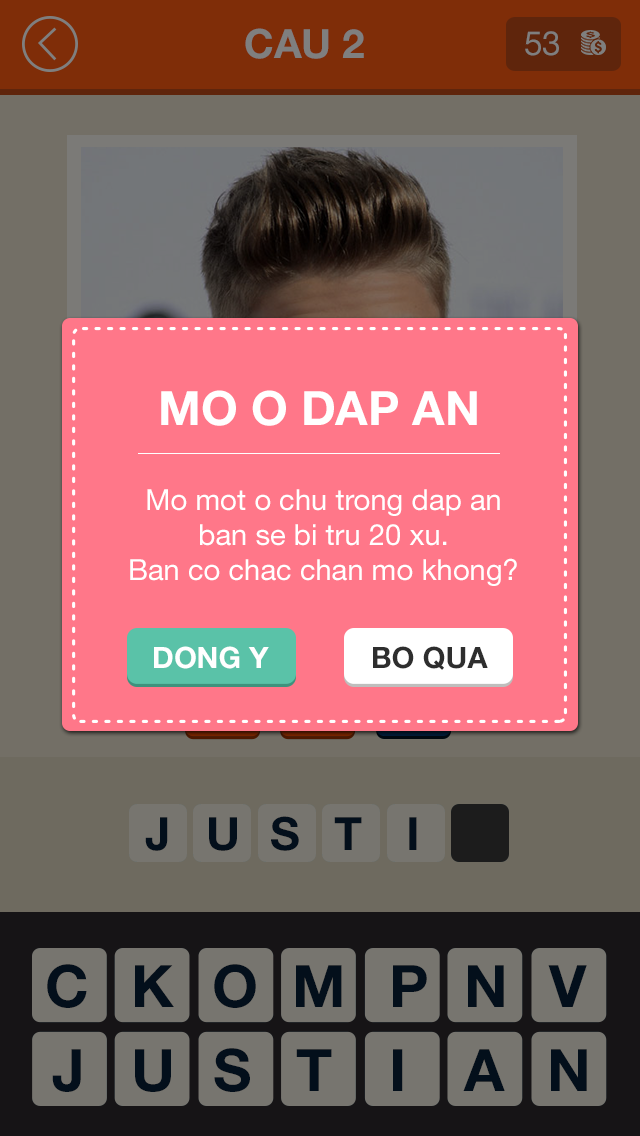
<style>
.page{position:relative;width:640px;height:1136px;background:#ff7789}
.page>*{position:absolute;margin:0}
.t1{font:47.1px "HelveticaNeueLTStd-Bd";color:#ffffff}
.t2{font:29.2px "HelveticaNeueLTStd-Roman";color:#ffffff}
.t3{font:29.3px "HelveticaNeueLTStd-Bd";color:#ffffff}
.t4{font:29.3px "HelveticaNeueLTStd-Bd";color:#2e2e2e}
</style>
<div class="page">
<p class="t1" style="left:161px;top:390px;width:316px;height:36px">MO O DAP AN</p>
<p class="t2" style="left:130px;top:489px;width:387px;height:97px;text-align:center">Mo mot o chu trong dap an ban se bi tru 20 xu. <br>Ban co chac chan mo khong?</p>
<p class="t3" style="left:154px;top:646px;width:115px;height:23px">DONG Y</p>
<p class="t4" style="left:373px;top:646px;width:115px;height:24px">BO QUA</p>
</div>
